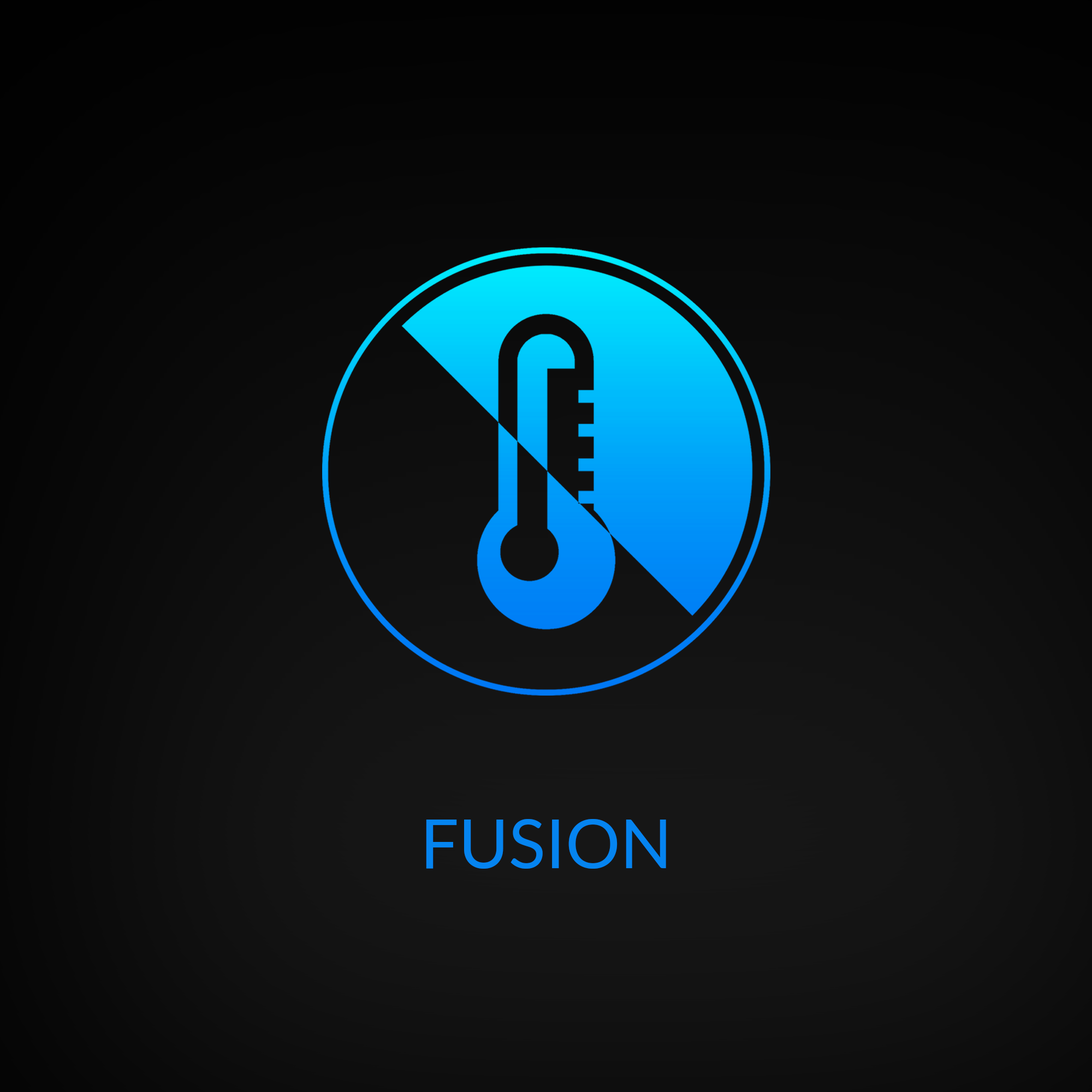
<style>
.page{position:relative;width:1092px;height:1092px}
.page>*{position:absolute;margin:0}
.t1{font:68.2px "Lato-Regular";color:#0584f0}
</style>
<div class="page">
<p class="t1" style="left:426px;top:819px;width:240px;height:50px">FUSION</p>
</div>
